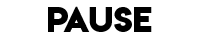
<style>
.page{position:relative;width:200px;height:40px;background:#ffffff}
.page>*{position:absolute;margin:0}
.t1{font:31.8px "LemonMilkbold";color:#000000}
</style>
<div class="page">
<p class="t1" style="left:48px;top:6px;width:104px;height:26px">Pause</p>
</div>
